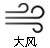
<style>
.page{position:relative;width:50px;height:48px;background:#ffffff}
.page>*{position:absolute;margin:0}
.t1{font:12px "OPPOSans-R";color:#000000}
</style>
<div class="page">
<p class="t1" style="left:14px;top:36px;width:23px;height:11px">大风</p>
</div>
